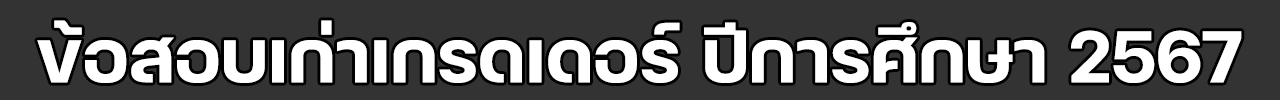
<style>
.page{position:relative;width:1280px;height:100px;background:#333333}
.page>*{position:absolute;margin:0}
.t1{font:100px "FCMinimalBold";color:#ffffff}
</style>
<div class="page">
<p class="t1" style="left:37px;top:20px;width:1205px;height:63px">ข้อสอบเก่าเกรดเดอร์ ปีการศึกษา 2567</p>
</div>
